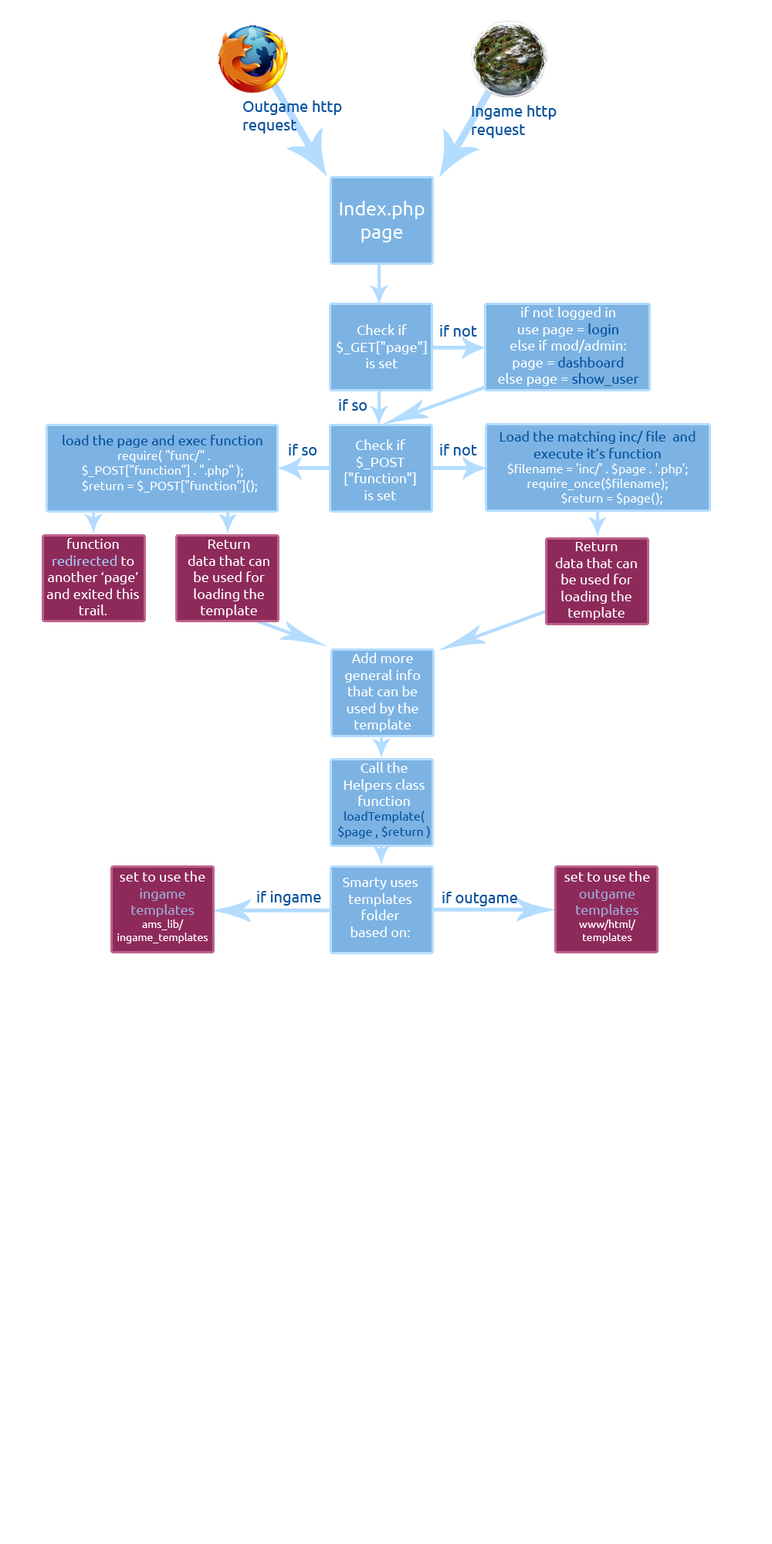
<style>
.page{position:relative;width:772px;height:1544px;background:#ffffff}
.page>*{position:absolute;margin:0}
.t1{font:15.4px "Ubuntu";color:#08529d}
.t2{font:19.3px "Ubuntu";color:#ffffff}
.t3{font:13.9px "Ubuntu";color:#ffffff}
.t4{font:13.9px "Ubuntu";color:#08529d}
.t5{font:13.9px "Ubuntu";color:#a1ccf7}
.t6{font:10.8px "Ubuntu";color:#ffffff}
.t7{font:13.9px "Ubuntu";color:#9dacd8}
</style>
<div class="page">
<p class="t1" style="left:243px;top:100px;width:99px;height:34px">Outgame http <br>request</p>
<p class="t1" style="left:472px;top:105px;width:85px;height:33px">Ingame http<br>request</p>
<p class="t2" style="left:340px;top:201px;width:85px;height:41px;text-align:center">Index.php <br>page</p>
<p class="t3" style="left:498px;top:307px;width:141px;height:79px;text-align:center">if not logged in <br>use page = <span class="t4">login<br></span>else if mod/admin:<br>page = <span class="t4">dashboard<br></span>else page = <span class="t4">show_user</span></p>
<p class="t3" style="left:337px;top:324px;width:90px;height:44px;text-align:center">Check if <br>$_GET["page"]<br>is set</p>
<p class="t1" style="left:440px;top:325px;width:37px;height:12px">if not</p>
<p class="t1" style="left:339px;top:399px;width:29px;height:12px">if so</p>
<p class="t1" style="left:289px;top:444px;width:28px;height:12px">if so</p>
<p class="t3" style="left:344px;top:439px;width:72px;height:61px;text-align:center">Check if <br>$_POST<br>["function"]<br>is set</p>
<p class="t1" style="left:440px;top:444px;width:37px;height:12px">if not</p>
<p class="t3" style="left:46px;top:538px;width:93px;height:77px;text-align:center">function <br><span class="t5">redirected</span> to another ‘page’<br>and exited this<br>trail.</p>
<p class="t3" style="left:188px;top:540px;width:81px;height:78px;text-align:center">Return <br>data that can <br>be used for<br>loading the<br>template</p>
<p class="t3" style="left:555px;top:542px;width:82px;height:78px;text-align:center">Return <br>data that can <br>be used for<br>loading the<br>template</p>
<p class="t3" style="left:345px;top:652px;width:76px;height:80px;text-align:center">Add more<br>general info <br>that can be <br>used by the<br>template</p>
<p class="t6" style="left:117px;top:871px;width:91px;height:73px;text-align:center"><span class="t3">set to use the<br></span><span class="t7">ingame<br>templates<br></span>ams_lib/<br>ingame_templates</p>
<p class="t3" style="left:343px;top:878px;width:75px;height:59px;text-align:center">Smarty uses<br>templates<br>folder<br>based on:</p>
<p class="t6" style="left:564px;top:871px;width:86px;height:73px;text-align:center"><span class="t3">set to use the<br></span><span class="t7">outgame<br>templates<br></span>www/html/<br>templates</p>
<p class="t1" style="left:257px;top:891px;width:64px;height:15px">if ingame</p>
<p class="t1" style="left:442px;top:892px;width:75px;height:15px">if outgame</p>
</div>
